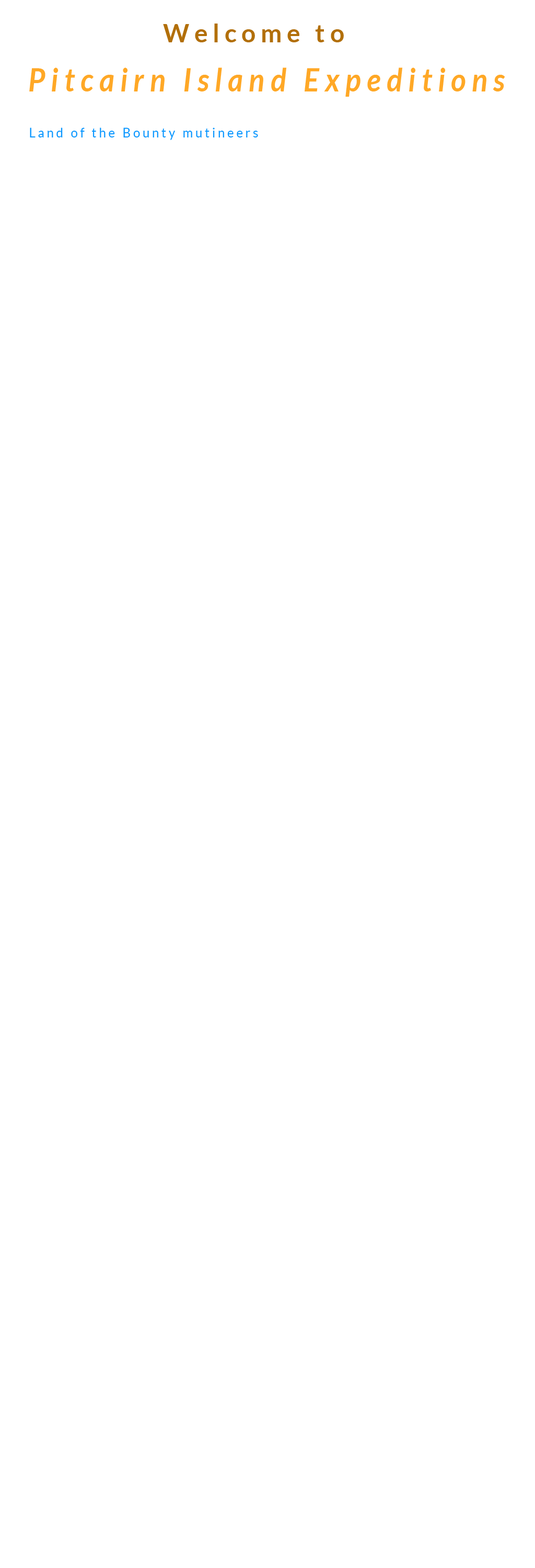
<style>
.page{position:relative;width:535px;height:1568px;background:#ffffff}
.page>*{position:absolute;margin:0}
.t1{font:25.1px "Lato-Bold";letter-spacing:0.2em;color:#b26f09}
.t2{font:32.2px "Lato-BoldItalic";letter-spacing:0.2em;color:#ffa826;scale:0.91 1}
.t3{font:13.8px "Lato-Regular";letter-spacing:0.2em;color:#0d98ff;scale:0.91 1}
</style>
<div class="page">
<p class="t1" style="left:163px;top:24px;width:181px;height:18px">Welcome to</p>
<p class="t2" style="left:29px;top:67px;width:476px;height:30px">Pitcairn Island Expeditions</p>
<p class="t3" style="left:30px;top:128px;width:228px;height:12px">Land of the Bounty mutineers</p>
</div>
